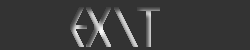
<style>
.page{position:relative;width:250px;height:50px;background:#333333}
.page>*{position:absolute;margin:0}
.t1{font:48px "exoziti";font-weight:bold}
</style>
<div class="page">
<p class="t1" style="left:70px;top:7px;width:90px;height:40px">EXIT</p>
</div>
